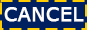
<style>
.page{position:relative;width:87px;height:30px;background:#002060}
.page>*{position:absolute;margin:0}
.t1{font:19px "Verdana";color:#ffffff;font-weight:bold}
</style>
<div class="page">
<p class="t1" style="left:4px;top:7px;width:80px;height:15px">CANCEL</p>
</div>
